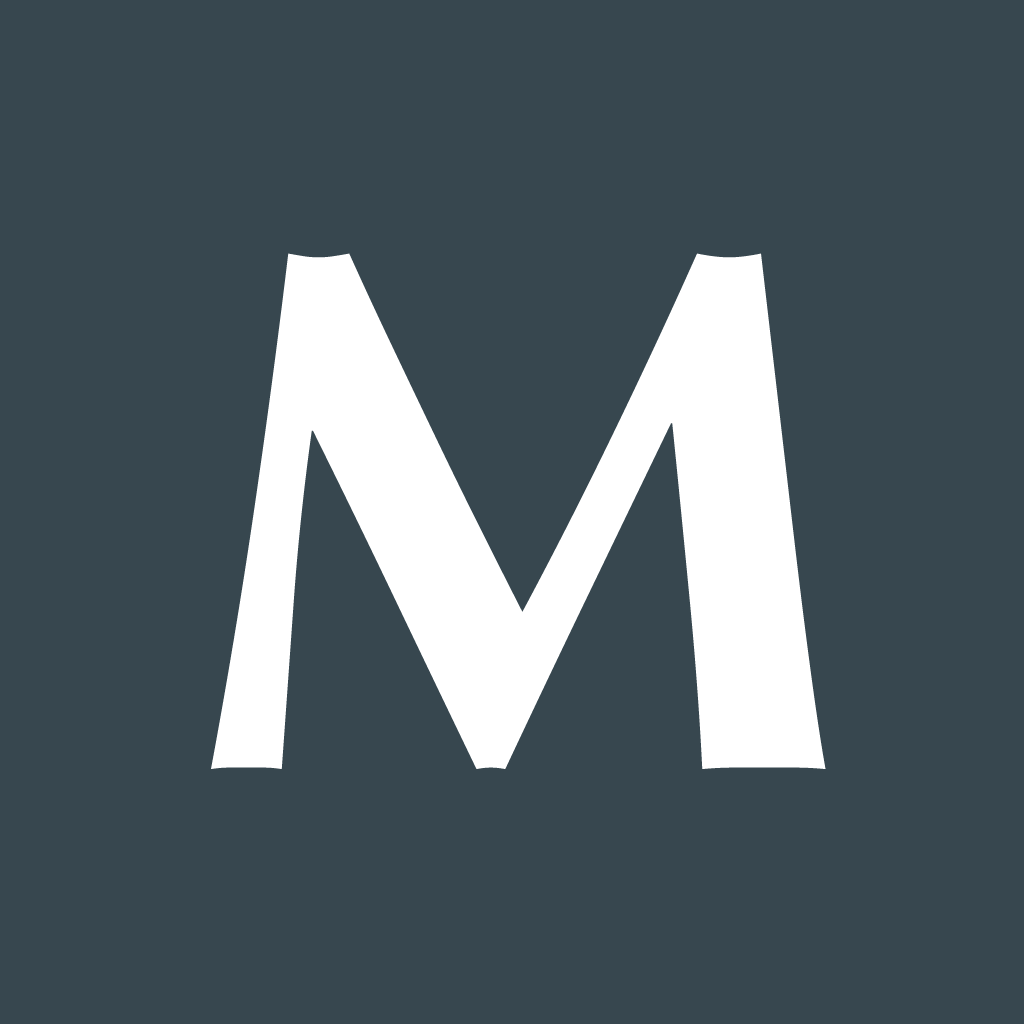
<style>
.page{position:relative;width:1024px;height:1024px;background:#37474f}
.page>*{position:absolute;margin:0}
.t1{font:750px "Optima-Bold";color:#ffffff}
</style>
<div class="page">
<p class="t1" style="left:211px;top:253px;width:615px;height:516px">M</p>
</div>
